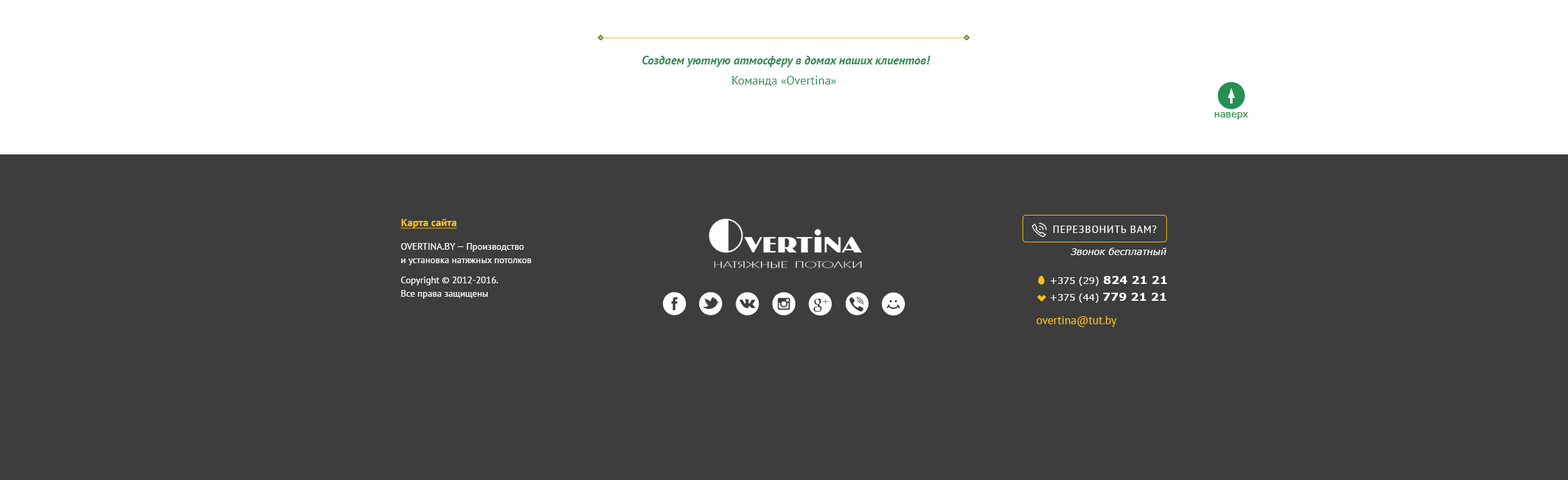
<style>
.page{position:relative;width:1568px;height:480px;background:#3c3d3c}
.page>*{position:absolute;margin:0}
.t1{font:12.1px/20.2px "PTSans-BoldItalic";color:#308d51}
.t2{font:12.1px/20.2px "PTSans-Regular";color:#308d51}
.t3{font:9.4px "Verdana";color:#308d51}
.t4{font:10.7px "PTSans-Bold";color:#f5c018;text-decoration:underline}
.t5{font:10.1px "PTSans-Regular";letter-spacing:0.075em;color:#ffffff;text-transform:uppercase}
.t6{font:9.4px/13.4px "PTSans-Regular";color:#ffffff}
.t7{font:9.4px "Verdana-Italic";color:#ffffff}
.t8{font:11.4px/16.8px "PTSans-Regular";color:#f5c018}
.t9{font:9.4px/16.8px "Verdana";color:#ffffff}
.t10{font:11.4px/16.8px "Verdana-Bold";color:#ffffff}
</style>
<div class="page">
<p class="t1" style="left:642px;top:56px;width:288px;height:30px;text-align:center">Создаем уютную атмосферу в домах наших клиентов!<br><span class="t2">Команда «Overtina»</span></p>
<p class="t3" style="left:1215px;top:112px;width:33px;height:8px">наверх</p>
<p class="t4" style="left:400px;top:219px;width:57px;height:10px">Карта сайта</p>
<p class="t5" style="left:1053px;top:226px;width:104px;height:7px">перезвонить вам?</p>
<p class="t6" style="left:401px;top:243px;width:130px;height:56px">OVERTINA.BY — Производство <br>и установка натяжных потолков  <br>Copyright © 2012-2016.<br>Все права защищены</p>
<p class="t7" style="left:1070px;top:248px;width:97px;height:7px">Звонок бесплатный</p>
<p class="t8" style="left:1037px;top:276px;width:130px;height:51px"><span class="t9">+375 (29) </span><span class="t10">824 21 21  </span><span class="t9"> <br>+375 (44) </span><span class="t10">779 21 21  <br></span>overtina@tut.by</p>
</div>
